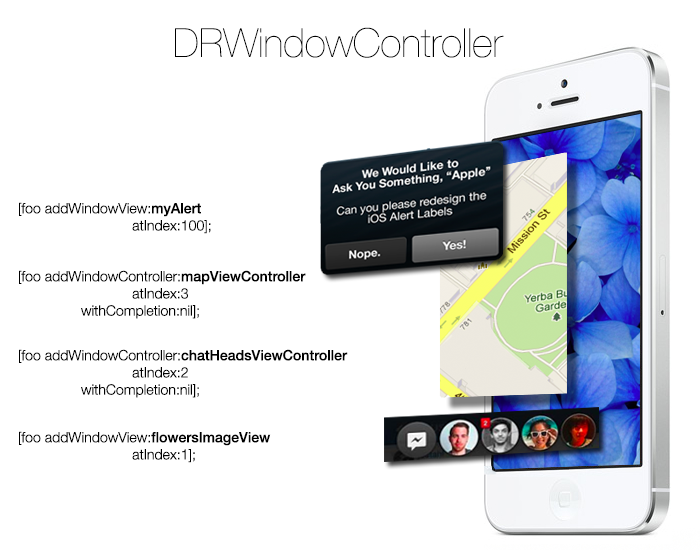
<style>
.page{position:relative;width:700px;height:550px;background:#ffffff}
.page>*{position:absolute;margin:0}
.t1{font:40px "HelveticaNeue-UltraLight";color:#000000}
.t2{font:14.3px "HelveticaNeue-Light";color:#000000}
.t3{font:14.3px "HelveticaNeue-Medium";color:#000000}
</style>
<div class="page">
<p class="t1" style="left:175px;top:27px;width:329px;height:31px">DRWindowController</p>
<p class="t2" style="left:19px;top:202px;width:192px;height:32px">[foo addWindowView:<span class="t3">myAlert<br></span>                             atIndex:100];</p>
<p class="t2" style="left:19px;top:270px;width:287px;height:49px">[foo addWindowController:<span class="t3">mapViewController <br></span>                             atIndex:3 <br>                withCompletion:nil];</p>
<p class="t2" style="left:19px;top:349px;width:329px;height:49px">[foo addWindowController:<span class="t3">chatHeadsViewController<br></span>                             atIndex:2 <br>                withCompletion:nil];</p>
<p class="t2" style="left:19px;top:431px;width:252px;height:32px">[foo addWindowView:<span class="t3">flowersImageView<br></span>                             atIndex:1];</p>
</div>
